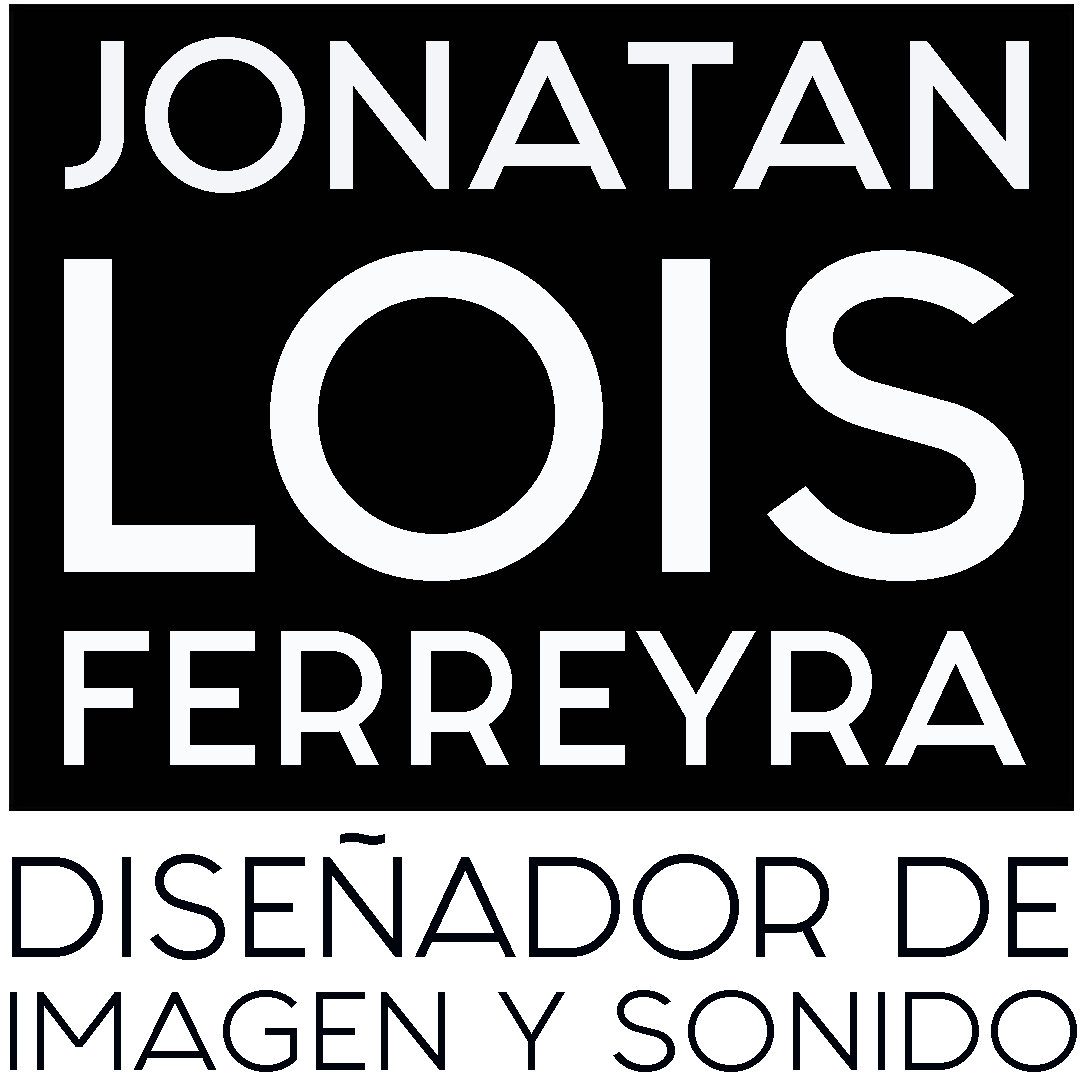
<style>
.page{position:relative;width:1080px;height:1080px;background:#010101}
.page>*{position:absolute;margin:0}
.t1{font:178.6px "Fashion-Fetish-Bold";color:#f3f5f8}
.t2{font:378.8px "Fashion-Fetish-Bold";color:#fafbfc}
.t3{font:162.3px "Fashion-Fetish-Bold";color:#fafbfc}
.t4{font:121.2px "FashionFetish";color:#00040d}
.t5{font:93.5px "FashionFetish";color:#00040d;scale:1.06 1}
.t6{font:137.2px "FashionFetish";color:#00040d;scale:1.06 1}
</style>
<div class="page">
<p class="t1" style="left:65px;top:37px;width:964px;height:156px">JONATAN</p>
<p class="t2" style="left:64px;top:250px;width:960px;height:331px">LOIS</p>
<p class="t3" style="left:64px;top:631px;width:962px;height:134px">FERREYRA</p>
<p class="t4" style="left:12px;top:833px;width:1056px;height:127px">DISEÑADOR DE</p>
<p class="t5" style="left:10px;top:990px;width:1067px;height:82px"><span class="t6"><br></span>IMAGEN Y SONIDO</p>
</div>
